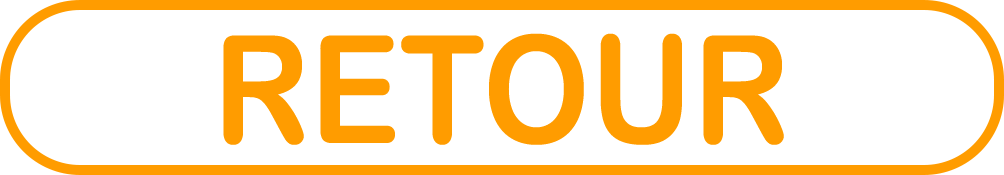
<style>
.page{position:relative;width:1004px;height:175px;background:#ffffff}
.page>*{position:absolute;margin:0}
.t1{font:150px "ArialRoundedMTBold";color:#ff9c00;text-transform:uppercase;scale:0.9 1}
</style>
<div class="page">
<p class="t1" style="left:223px;top:33px;width:561px;height:112px">Retour</p>
</div>
